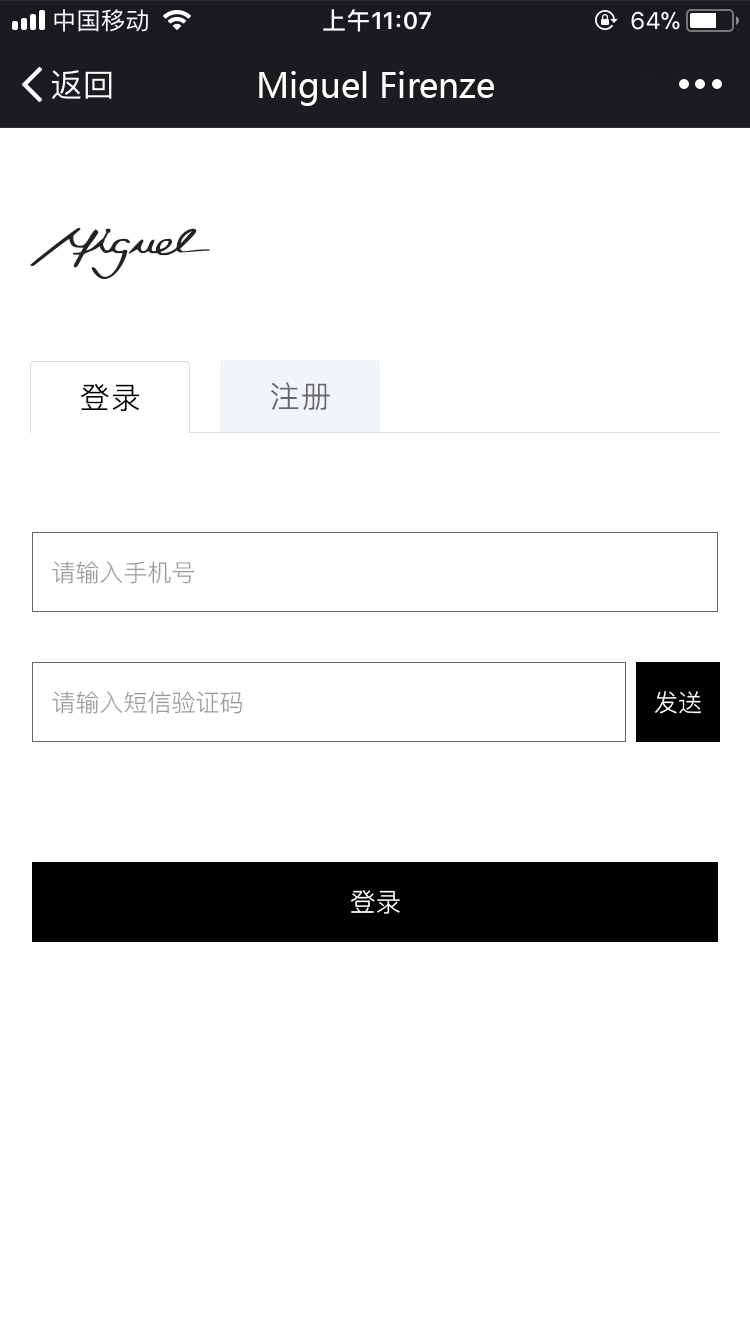
<style>
.page{position:relative;width:750px;height:1334px;background:#ffffff}
.page>*{position:absolute;margin:0}
.t1{font:34px "MicrosoftYaHei";color:#ffffff}
.t2{font:30px "PingFang-SC-Regular";letter-spacing:0.05em;color:#000000;text-transform:uppercase}
.t3{font:30px "PingFang-SC-Regular";letter-spacing:0.05em;color:#666666;text-transform:uppercase}
.t4{font:24px "PingFang-SC-Regular";color:#999999}
.t5{font:24px "PingFang-SC-Regular";color:#ffffff}
.t6{font:26px "PingFang-SC-Regular";color:#ffffff}
</style>
<div class="page">
<p class="t1" style="left:259px;top:71px;width:235px;height:35px">Miguel Firenze</p>
<p class="t2" style="left:80px;top:383px;width:59px;height:28px">登录</p>
<p class="t3" style="left:271px;top:382px;width:59px;height:28px">注册</p>
<p class="t4" style="left:52px;top:561px;width:143px;height:23px">请输入手机号</p>
<p class="t4" style="left:52px;top:691px;width:190px;height:23px">请输入短信验证码</p>
<p class="t5" style="left:655px;top:691px;width:46px;height:23px">发送</p>
<p class="t6" style="left:350px;top:890px;width:50px;height:24px">登录</p>
</div>
